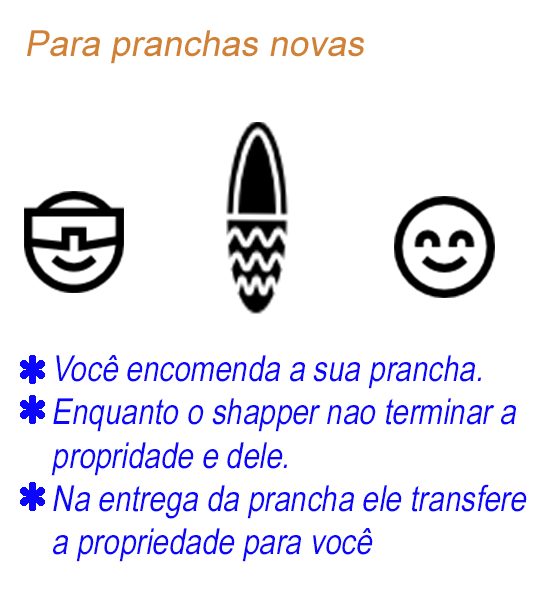
<style>
.page{position:relative;width:540px;height:600px;background:#ffffff}
.page>*{position:absolute;margin:0}
.t1{font:36px "ArialMT";color:#d08133;font-style:italic}
.t2{font:36px "ArialNarrow";color:#0c06fa;font-style:italic}
</style>
<div class="page">
<p class="t1" style="left:27px;top:30px;width:337px;height:34px">Para pranchas novas</p>
<p class="t2" style="left:51px;top:355px;width:476px;height:207px">Você encomenda a sua prancha.<br>Enquanto o shapper nao terminar a<br>propridade e dele.<br>Na entrega da prancha ele transfere<br>a propriedade para você</p>
</div>
